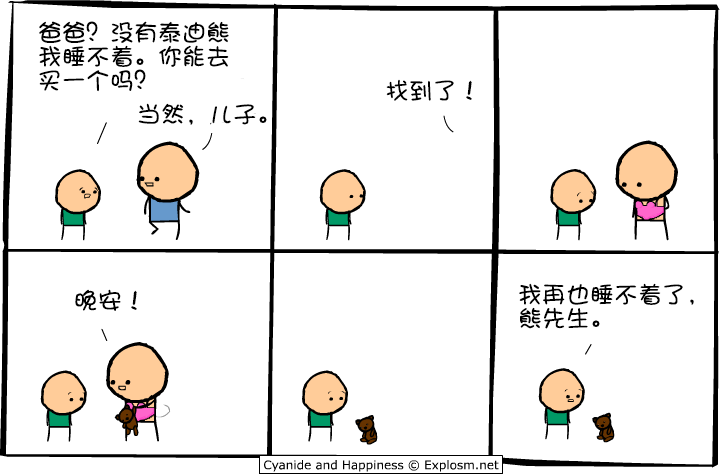
<style>
.page{position:relative;width:720px;height:475px;background:#ffffff}
.page>*{position:absolute;margin:0}
.t1{font:24px/24px "DFShaoNvW5";color:#000000}
.t2{font:24px "DFShaoNvW5";color:#000000}
</style>
<div class="page">
<p class="t1" style="left:39px;top:21px;width:190px;height:71px">爸爸？没有泰迪熊<br>我睡不着。你能去<br>买一个吗？</p>
<p class="t2" style="left:386px;top:79px;width:86px;height:22px">找到了！</p>
<p class="t2" style="left:138px;top:103px;width:129px;height:22px">当然，儿子。</p>
<p class="t2" style="left:75px;top:289px;width:62px;height:22px">晚安！</p>
<p class="t1" style="left:519px;top:283px;width:175px;height:46px">我再也睡不着了，<br>熊先生。</p>
</div>
